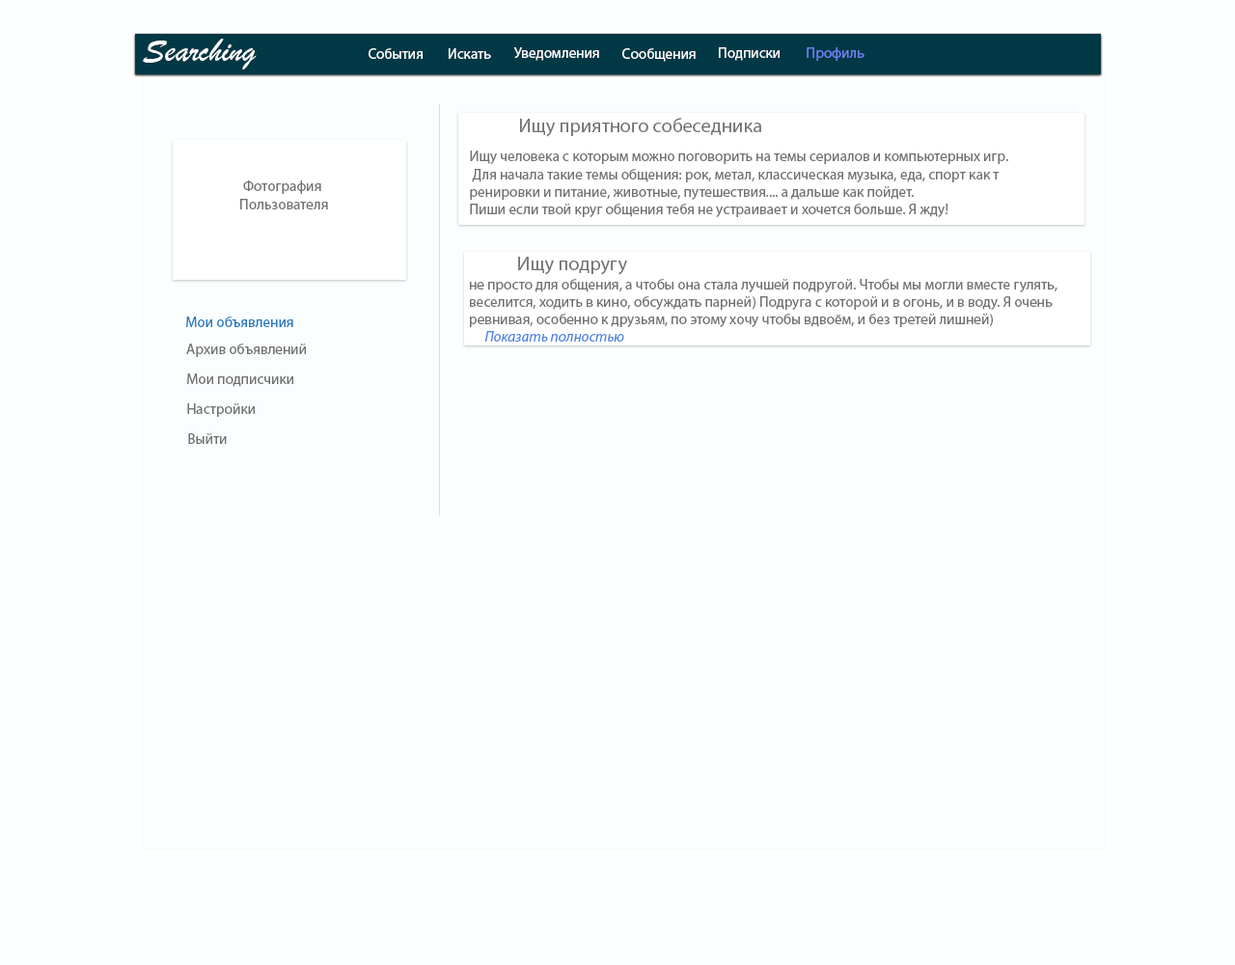
<style>
.page{position:relative;width:1235px;height:965px;background:#fafeff}
.page>*{position:absolute;margin:0}
.t1{font:34.3px "BrushScriptMT";color:#ffffff}
.t2{font:14.7px "MyriadPro-Regular";color:#ffffff}
.t3{font:14.7px "MyriadPro-Regular";color:#6a81f6}
.t4{font:19.6px "MyriadPro-Regular";color:#727171}
.t5{font:14.7px "MyriadPro-Regular";color:#727171}
.t6{font:14.7px "MyriadPro-Regular";color:#2378c0}
.t7{font:14.7px "MyriadPro-It";color:#4f83e1}
</style>
<div class="page">
<p class="t1" style="left:143px;top:39px;width:114px;height:30px">Searching</p>
<p class="t2" style="left:369px;top:48px;width:54px;height:11px">События</p>
<p class="t2" style="left:449px;top:48px;width:42px;height:11px">Искать</p>
<p class="t2" style="left:513px;top:47px;width:86px;height:14px">Уведомления</p>
<p class="t2" style="left:623px;top:48px;width:73px;height:14px">Сообщения</p>
<p class="t2" style="left:719px;top:47px;width:61px;height:14px">Подписки</p>
<p class="t3" style="left:807px;top:47px;width:58px;height:14px">Профиль</p>
<p class="t4" style="left:520px;top:118px;width:242px;height:19px">Ищу приятного собеседника</p>
<p class="t5" style="left:470px;top:151px;width:539px;height:66px">Ищу человека с которым можно поговорить на темы сериалов и компьютерных игр.<br> Для начала такие темы общения: рок, метал, классическая музыка, еда, спорт как т<br>ренировки и питание, животные, путешествия.... а дальше как пойдет. <br>Пиши если твой круг общения тебя не устраивает и хочется больше. Я жду!</p>
<p class="t5" style="left:240px;top:180px;width:88px;height:29px;text-align:center">Фотография <br>Пользователя</p>
<p class="t4" style="left:518px;top:257px;width:109px;height:18px">Ищу подругу</p>
<p class="t5" style="left:470px;top:279px;width:588px;height:48px">не просто для общения, а чтобы она стала лучшей подругой. Чтобы мы могли вместе гулять, <br>веселится, ходить в кино, обсуждать парней) Подруга с которой и в огонь, и в воду. Я очень <br>ревнивая, особенно к друзьям, по этому хочу чтобы вдвоём, и без третей лишней)</p>
<p class="t6" style="left:186px;top:317px;width:107px;height:10px">Мои объявления</p>
<p class="t7" style="left:485px;top:331px;width:139px;height:11px">Показать полностью</p>
<p class="t5" style="left:186px;top:344px;width:120px;height:13px">Архив объявлений</p>
<p class="t5" style="left:187px;top:374px;width:106px;height:13px">Мои подписчики</p>
<p class="t5" style="left:187px;top:403px;width:68px;height:14px">Настройки</p>
<p class="t5" style="left:188px;top:433px;width:39px;height:11px">Выйти</p>
</div>
